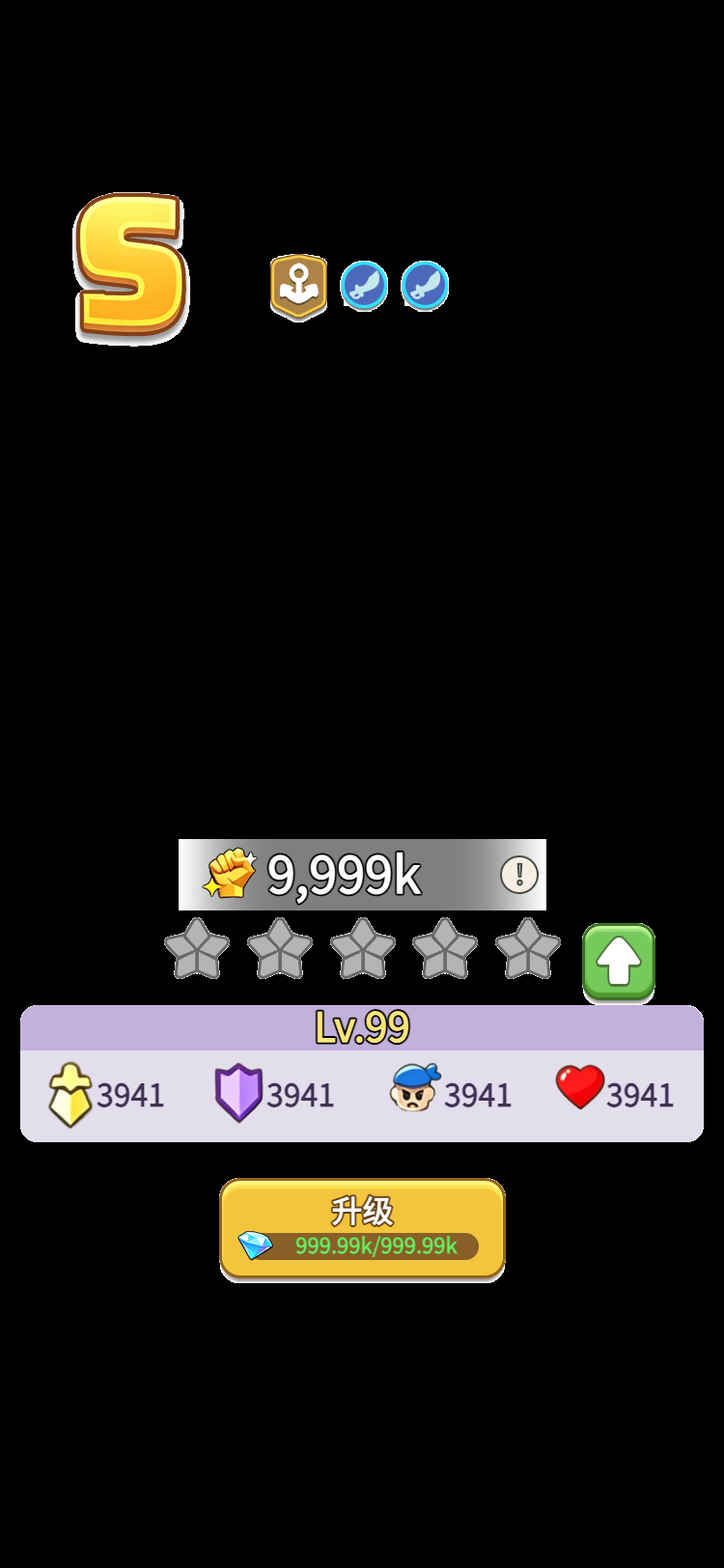
<style>
.page{position:relative;width:724px;height:1568px;background:#000000}
.page>*{position:absolute;margin:0}
.t1{font:50.2px "WebPSD-18463539-0-Regular";color:#ffffff;font-weight:bold}
.t2{font:30.9px "WebPSD-18463539-0-Regular";color:#3f3254;font-weight:bold}
.t3{font:30.9px "WebPSD-18463539-0-Regular";color:#ffffff;font-weight:bold}
.t4{font:21.2px "WebPSD-18463539-0-Regular";color:#65ee62;font-weight:bold}
</style>
<div class="page">
<p class="t1" style="left:266px;top:843px;width:241px;height:64px">9,999k</p>
<p class="t2" style="left:97px;top:1072px;width:106px;height:46px">3941</p>
<p class="t2" style="left:266px;top:1072px;width:107px;height:46px">3941</p>
<p class="t2" style="left:444px;top:1072px;width:106px;height:46px">3941</p>
<p class="t2" style="left:606px;top:1072px;width:87px;height:46px">3941</p>
<p class="t3" style="left:219px;top:1190px;width:287px;height:42px">升级</p>
<p class="t4" style="left:275px;top:1230px;width:203px;height:31px">999.99k/999.99k</p>
</div>
